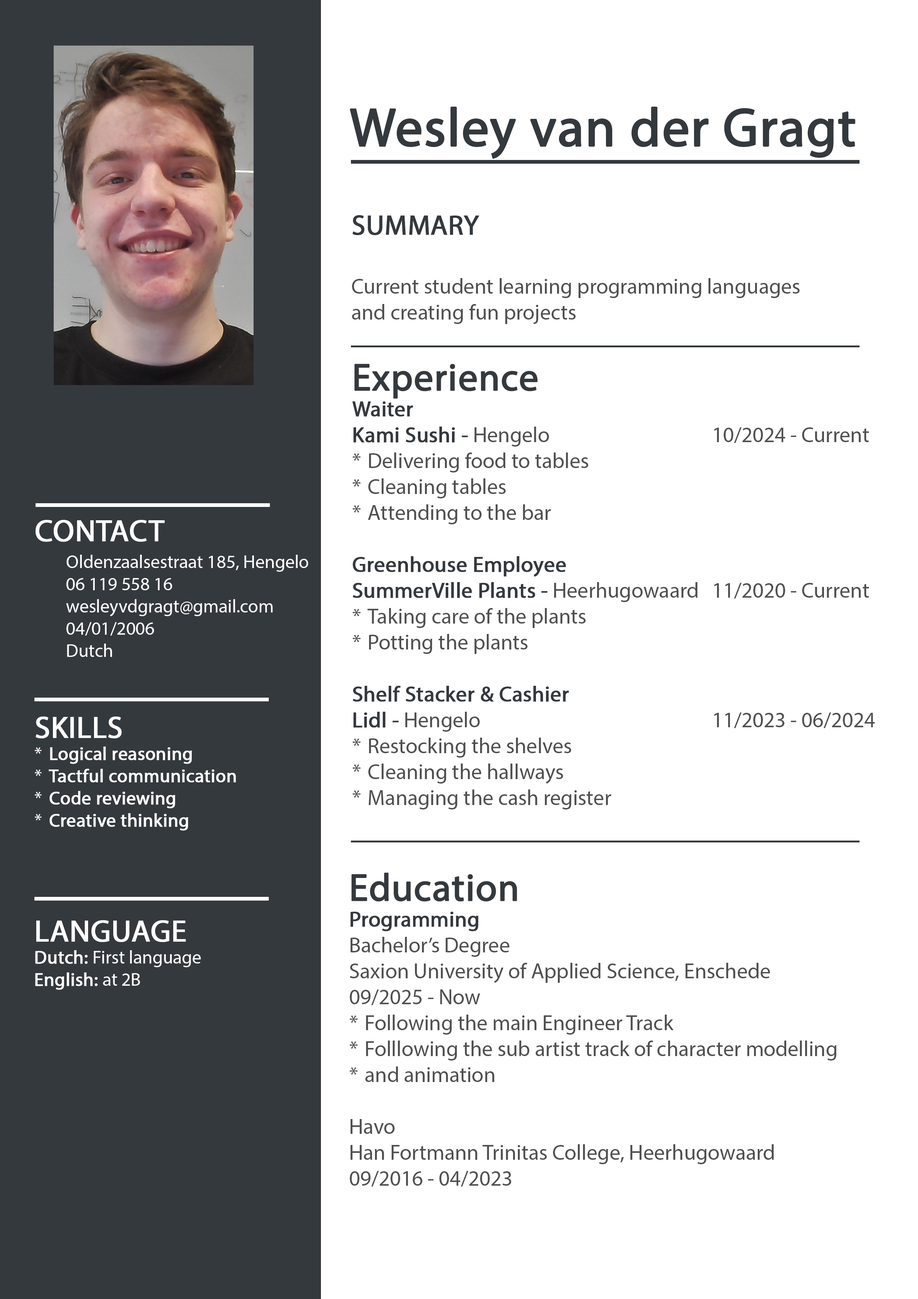
<style>
.page{position:relative;width:918px;height:1299px;background:#ffffff}
.page>*{position:absolute;margin:0}
.t1{font:54.4px "MyriadPro-Regular";color:#34393e;font-weight:bold}
.t2{font:21.6px "MyriadPro-Regular";color:#505050}
.t3{font:27.8px "MyriadPro-Regular";color:#34393e;font-weight:bold}
.t4{font:38.6px "MyriadPro-Regular";color:#34393e;font-weight:bold}
.t5{font:21.6px "MyriadPro-Regular";color:#34393e;font-weight:bold}
.t6{font:30.9px "MyriadPro-Regular";color:#ffffff;font-weight:bold}
.t7{font:18.5px "MyriadPro-Regular";color:#ffffff}
.t8{font:18.5px "MyriadPro-Regular";color:#ffffff;font-weight:bold}
</style>
<div class="page">
<p class="t1" style="left:350px;top:106px;width:506px;height:53px">Wesley van der Gragt</p>
<p class="t2" style="left:352px;top:215px;width:448px;height:109px"><span class="t3">SUMMARY<br><br></span>Current student learning programming languages<br>and creating fun projects</p>
<p class="t2" style="left:352px;top:364px;width:523px;height:445px"><span class="t4">Experience<br></span><span class="t5">Waiter<br>Kami Sushi - </span>Hengelo             10/2024 - Current<br>Delivering food to tables<br>Cleaning tables<br>Attending to the bar<br><br><span class="t5">Greenhouse Employee<br>SummerVille Plants - </span>Heerhugowaard 11/2020 - Current<br>Taking care of the plants<br>Potting the plants<br><br><span class="t5">Shelf Stacker &amp; Cashier<br>Lidl - </span>Hengelo                  11/2023 - 06/2024<br>Restocking the shelves<br>Cleaning the hallways<br>Managing the cash register</p>
<p class="t6" style="left:36px;top:520px;width:129px;height:22px">CONTACT</p>
<p class="t7" style="left:66px;top:555px;width:242px;height:102px">Oldenzaalsestraat 185, Hengelo<br>06 119 558 16<br>wesleyvdgragt@gmail.com<br>04/01/2006<br>Dutch</p>
<p class="t8" style="left:35px;top:716px;width:201px;height:114px"><span class="t6">SKILLS<br></span>Logical reasoning<br>Tactful communication<br>Code reviewing<br>Creative thinking</p>
<p class="t2" style="left:350px;top:872px;width:487px;height:315px"><span class="t4">Education<br></span><span class="t5">Programming<br></span>Bachelor’s Degree<br>Saxion University of Applied Science, Enschede<br>09/2025 - Now<br>Following the main Engineer Track<br>Folllowing the sub artist track of character modelling<br>and animation<br><br>Havo<br>Han Fortmann Trinitas College, Heerhugowaard<br>09/2016 - 04/2023</p>
<p class="t7" style="left:35px;top:920px;width:166px;height:70px"><span class="t6">LANGUAGE<br></span><span class="t8">Dutch: </span>First language<br><span class="t8">English: </span>at 2B</p>
</div>
